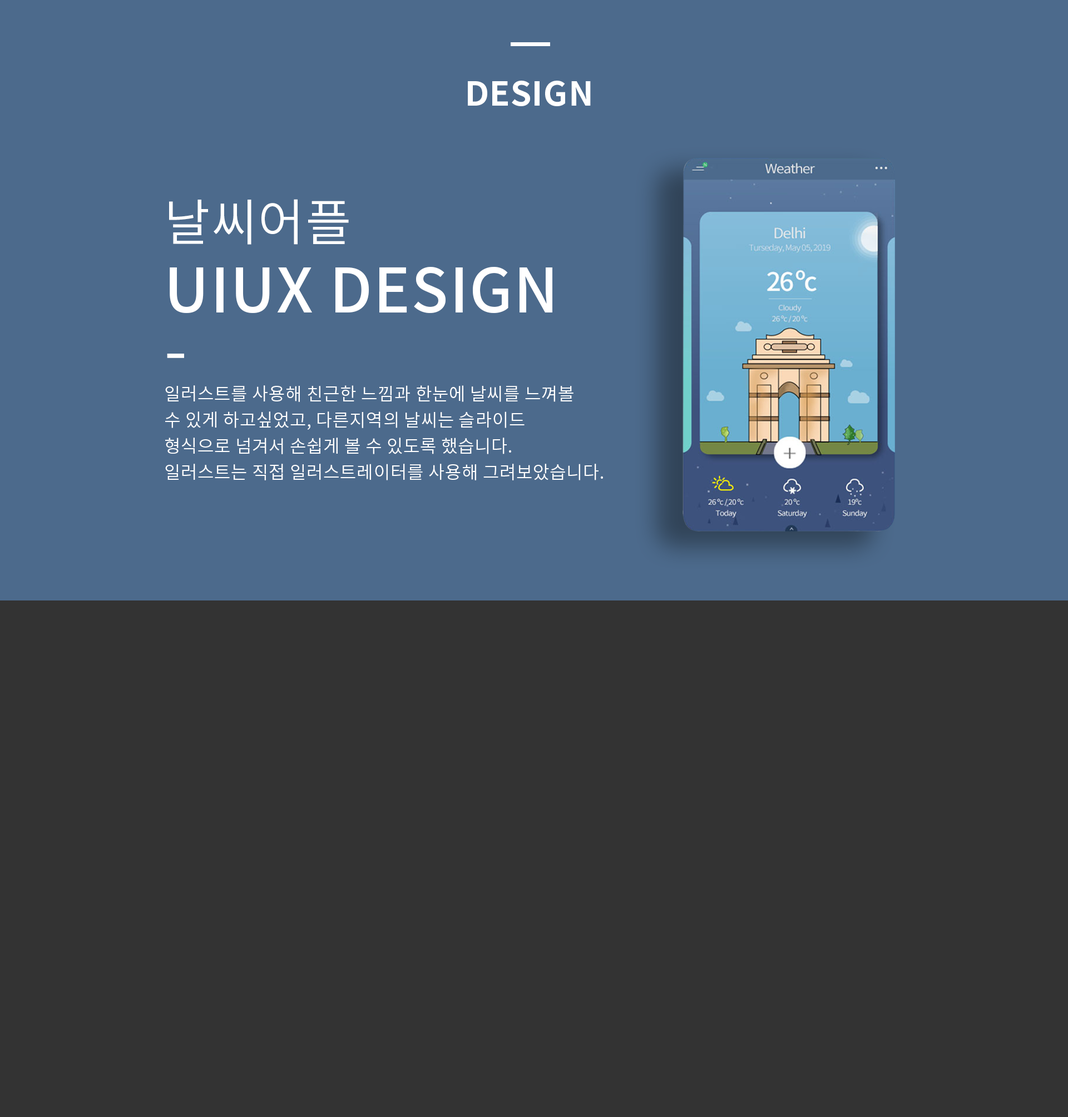
<style>
.page{position:relative;width:1068px;height:1117px;background:#333333}
.page>*{position:absolute;margin:0}
.t1{font:33.4px "NotoSansCJKkr-Bold";letter-spacing:0.02em;color:#ffffff;text-transform:uppercase}
.t2{font:17.8px/26.1px "NotoSansCJKkr-DemiLight";letter-spacing:0.02em;color:#ffffff;text-transform:uppercase}
.t3{font:50px/56.7px "NotoSansCJKkr-DemiLight";letter-spacing:0.02em;color:#ffffff;text-transform:uppercase}
.t4{font:61.2px/71.7px "NotoSansCJKkr-Medium";letter-spacing:0.02em;color:#ffffff;text-transform:uppercase}
.t5{font:66.7px/61.7px "NotoSansCJKkr-DemiLight";letter-spacing:0.02em;color:#ffffff;text-transform:uppercase}
</style>
<div class="page">
<p class="t1" style="left:468px;top:81px;width:122px;height:25px">design</p>
<p class="t2" style="left:165px;top:199px;width:438px;height:281px"><span class="t3">날씨어플<br></span><span class="t4">uiux design<br></span><span class="t5">-<br></span>일러스트를 사용해 친근한 느낌과 한눈에 날씨를 느껴볼<br>수 있게 하고싶었고, 다른지역의 날씨는 슬라이드 <br>형식으로 넘겨서 손쉽게 볼 수 있도록 했습니다.<br>일러스트는 직접 일러스트레이터를 사용해 그려보았습니다.</p>
</div>
